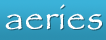
<style>
.page{position:relative;width:106px;height:40px}
.page>*{position:absolute;margin:0}
.t1{font:39.2px "Papyrus-Regular";color:#ffffff}
</style>
<div class="page">
<p class="t1" style="left:5px;top:4px;width:97px;height:26px">aeries</p>
</div>
